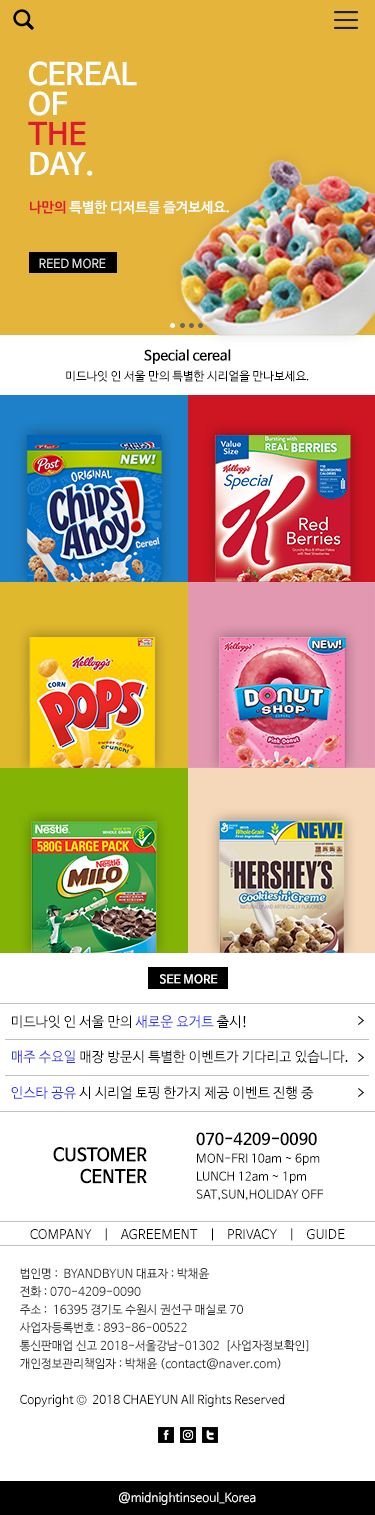
<style>
.page{position:relative;width:375px;height:1515px;background:#ffffff}
.page>*{position:absolute;margin:0}
.t1{font:30px/30px "NanumBarunGothicBold";color:#ffffff}
.t2{font:30px/30px "NanumBarunGothicBold";color:#de1b2c}
.t3{font:14px "NanumBarunGothicBold";color:#ffffff}
.t4{font:14px "NanumBarunGothicBold";color:#de1b2c}
.t5{font:12px "NanumBarunGothic";color:#eeeeee}
.t6{font:12px/20px "NanumBarunGothic";color:#000000}
.t7{font:14px/20px "NanumBarunGothicBold";color:#000000}
.t8{font:12px "NanumBarunGothicBold";color:#ffffff}
.t9{font:14px "NanumBarunGothic";color:#000000}
.t10{font:14px "NanumBarunGothic";color:#2831f1}
.t11{font:12px/18px "NanumBarunGothic";color:#000000}
.t12{font:16px/18px "NanumBarunGothicBold";color:#000000}
.t13{font:18px "NanumBarunGothicBold";color:#000000}
.t14{font:13px "NanumBarunGothic";color:#000000}
.t15{font:12px/18px "NanumBarunGothic";color:#333333}
.t16{font:12px "NanumBarunGothic";color:#ffffff}
</style>
<div class="page">
<p class="t1" style="left:28px;top:61px;width:109px;height:115px">CEREAL<br>OF<br><span class="t2">THE<br></span>DAY.</p>
<p class="t3" style="left:30px;top:200px;width:199px;height:14px"><span class="t4">나만의</span> 특별한 디저트를 즐겨보세요.</p>
<p class="t5" style="left:39px;top:258px;width:67px;height:11px">REED MORE</p>
<p class="t6" style="left:66px;top:349px;width:243px;height:33px;text-align:center"><span class="t7">Special cereal<br></span>미드나잇 인 서울 만의 특별한 시리얼을 만나보세요.</p>
<p class="t8" style="left:160px;top:974px;width:58px;height:10px">SEE MORE</p>
<p class="t9" style="left:12px;top:1015px;width:234px;height:13px">미드나잇 인 서울 만의 <span class="t10">새로운 요거트</span> 출시!</p>
<p class="t9" style="left:12px;top:1050px;width:336px;height:14px"><span class="t10">매주 수요일</span> 매장 방문시 특별한 이벤트가 기다리고 있습니다.</p>
<p class="t9" style="left:11px;top:1086px;width:303px;height:14px"><span class="t10">인스타 공유</span> 시 시리얼 토핑 한가지 제공 이벤트 진행 중</p>
<p class="t11" style="left:196px;top:1132px;width:127px;height:69px"><span class="t12">070-4209-0090<br></span>MON-FRI 10am ~ 6pm<br>LUNCH 12am ~ 1pm<br>SAT,SUN,HOLIDAY OFF</p>
<p class="t13" style="left:53px;top:1147px;width:94px;height:37px;text-align:right">CUSTOMER<br>CENTER</p>
<p class="t14" style="left:30px;top:1228px;width:315px;height:13px">COMPANY    |    AGREEMENT    |    PRIVACY    |    GUIDE</p>
<p class="t15" style="left:19px;top:1268px;width:290px;height:139px">법인명 :  BYANDBYUN 대표자 : 박채윤<br>전화 : 070-4209-0090<br>주소 :  16395 경기도 수원시 권선구 매실로 70<br>사업자등록번호 : 893-86-00522<br>통신판매업 신고 2018-서울강남-01302  [사업자정보확인]<br>개인정보관리책임자 : 박채윤 (contact@naver.com)<br><span class="t11"><br>Copyright ©  2018 CHAEYUN All Rights Reserved</span></p>
<p class="t16" style="left:119px;top:1492px;width:137px;height:13px">@midnightinseoul_Korea</p>
</div>
